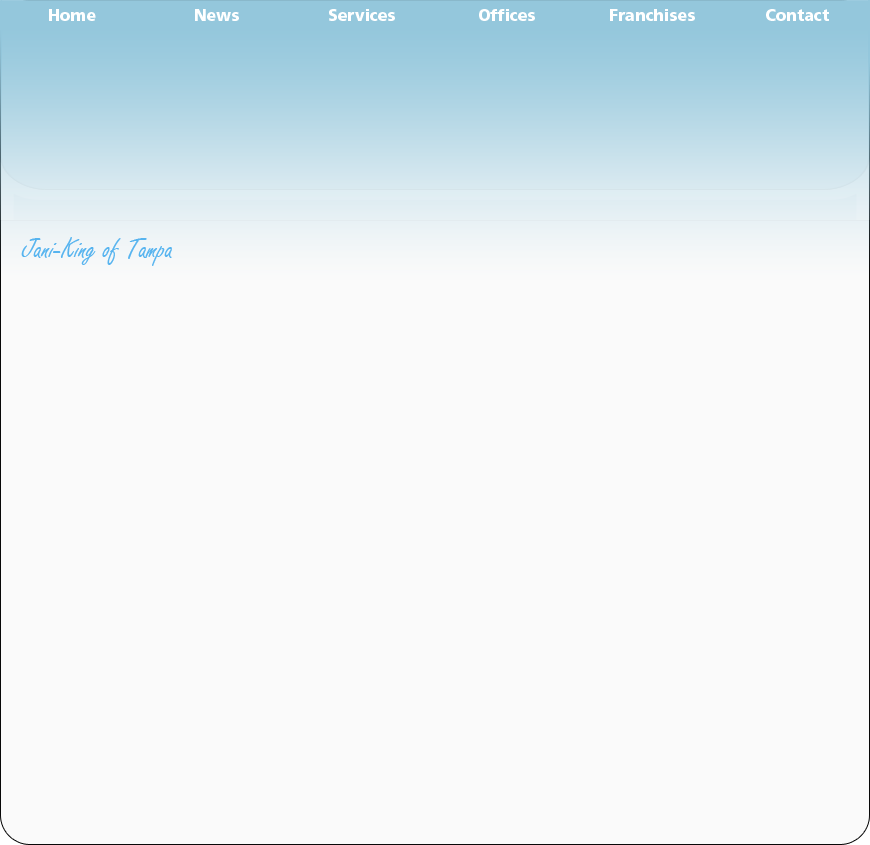
<style>
.page{position:relative;width:870px;height:845px;background:#fafafa}
.page>*{position:absolute;margin:0}
.t1{font:16px "FrutigerLTStd-Black";color:#ffffff}
.t2{font:30px "FreestyleScript-Regular";color:#57b4ef}
</style>
<div class="page">
<p class="t1" style="left:49px;top:9px;width:47px;height:12px">Home</p>
<p class="t1" style="left:195px;top:9px;width:44px;height:12px">News</p>
<p class="t1" style="left:329px;top:9px;width:66px;height:12px">Services</p>
<p class="t1" style="left:479px;top:9px;width:56px;height:12px">Offices</p>
<p class="t1" style="left:610px;top:9px;width:85px;height:12px">Franchises</p>
<p class="t1" style="left:766px;top:9px;width:63px;height:12px">Contact</p>
<p class="t2" style="left:21px;top:237px;width:151px;height:29px">Jani-King of Tampa</p>
</div>
